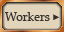
<style>
.page{position:relative;width:64px;height:32px;background:#e3d5bc}
.page>*{position:absolute;margin:0}
.t1{font:12px "PalatinoLinotype-Roman";color:#35302a}
.t2{font:12px "PalatinoLinotype-Roman";letter-spacing:-0.06em;color:#35302a}
.t3{font:8px "ArialMT";color:#35302a}
</style>
<div class="page">
<p class="t1" style="left:5px;top:12px;width:55px;height:9px"><span class="t2">W</span>orkers <span class="t3">►</span></p>
</div>
